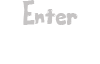
<style>
.page{position:relative;width:100px;height:64px;background:#ffffff}
.page>*{position:absolute;margin:0}
.t1{font:26px "BumpyRoad";color:#c6c4c4}
</style>
<div class="page">
<p class="t1" style="left:22px;top:0px;width:56px;height:25px">Enter</p>
</div>
